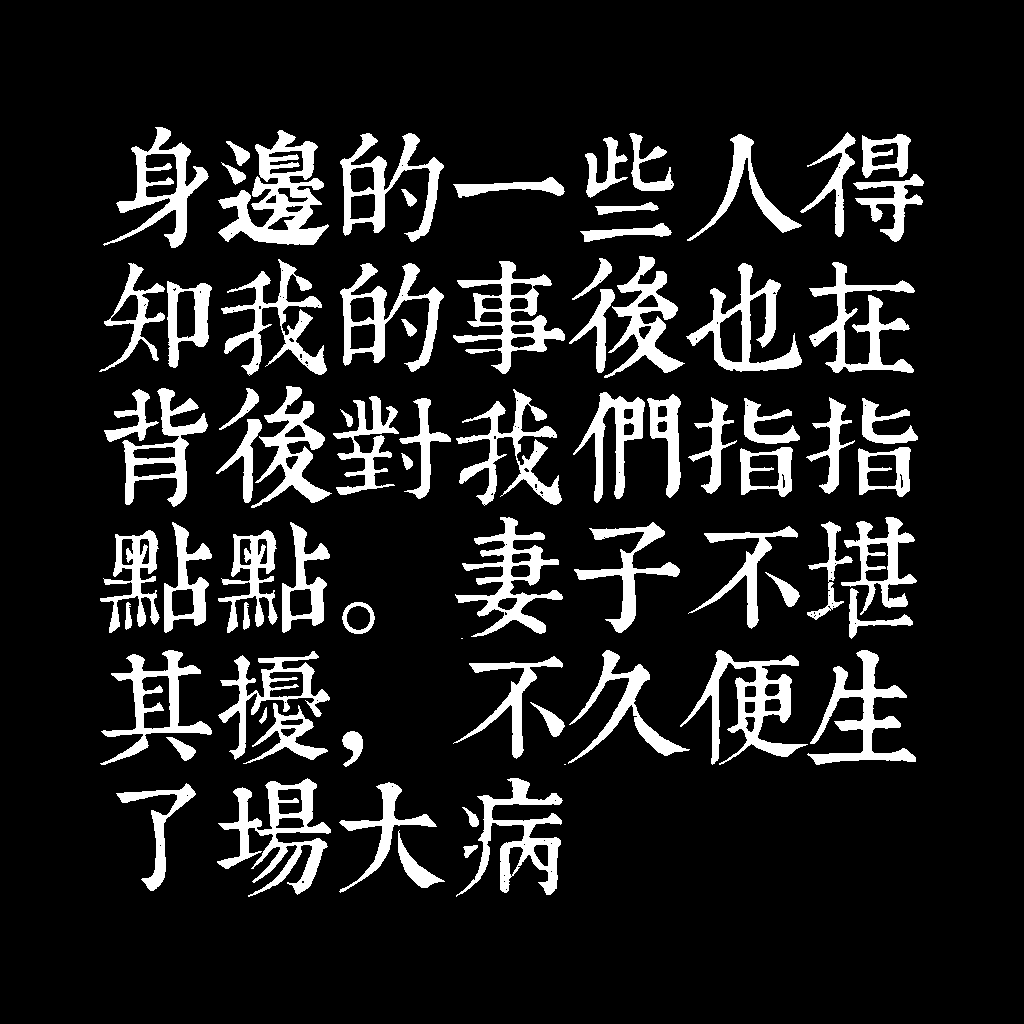
<style>
.page{position:relative;width:1024px;height:1024px;background:#000000}
.page>*{position:absolute;margin:0}
.t1{font:120px/130px "TpldKhangXiDictTrial";letter-spacing:-0.02em;color:#ffffff}
</style>
<div class="page">
<p class="t1" style="left:99px;top:127px;width:825px;height:770px">身邊的一些人得<br>知我的事後也在<br>背後對我們指指<br>點點。妻子不堪<br>其擾，不久便生<br>了場大病</p>
</div>
